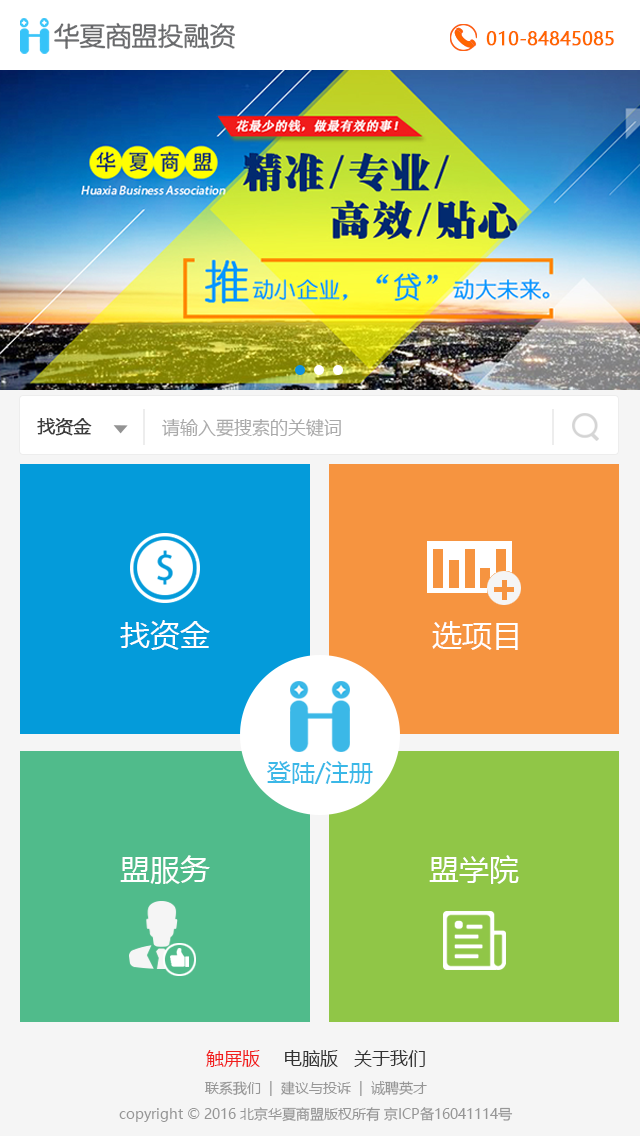
<style>
.page{position:relative;width:640px;height:1136px}
.page>*{position:absolute;margin:0}
.t1{font:18px "MicrosoftYaHei";color:#ff6600;font-weight:bold}
.t2{font:18px "MicrosoftYaHei";color:#3e3e3e;font-weight:bold}
.t3{font:18px "MicrosoftYaHei";color:#aaaaaa}
.t4{font:30px "MicrosoftYaHei";color:#ffffff}
.t5{font:24px "MicrosoftYaHei";color:#3bb8e7}
.t6{font:18px "MicrosoftYaHei";color:#f11d1c}
.t7{font:18px "MicrosoftYaHei";color:#333333}
.t8{font:14px "MicrosoftYaHei";color:#969696}
</style>
<div class="page">
<p class="t1" style="left:486px;top:31px;width:128px;height:15px">010-84845085</p>
<p class="t2" style="left:37px;top:418px;width:55px;height:18px">找资金</p>
<p class="t3" style="left:162px;top:418px;width:179px;height:19px">请输入要搜索的关键词</p>
<p class="t4" style="left:120px;top:620px;width:90px;height:30px">找资金</p>
<p class="t4" style="left:432px;top:621px;width:86px;height:29px">选项目</p>
<p class="t5" style="left:267px;top:761px;width:106px;height:23px">登陆/注册</p>
<p class="t4" style="left:120px;top:855px;width:90px;height:29px">盟服务</p>
<p class="t4" style="left:429px;top:855px;width:90px;height:29px">盟学院</p>
<p class="t6" style="left:206px;top:1050px;width:54px;height:17px">触屏版</p>
<p class="t7" style="left:285px;top:1050px;width:53px;height:17px">电脑版</p>
<p class="t7" style="left:354px;top:1050px;width:71px;height:17px">关于我们</p>
<p class="t8" style="left:205px;top:1081px;width:222px;height:15px">联系我们  |  建议与投诉  |  诚聘英才</p>
<p class="t8" style="left:119px;top:1107px;width:394px;height:15px">copyright © 2016 北京华夏商盟版权所有 京ICP备16041114号</p>
</div>
